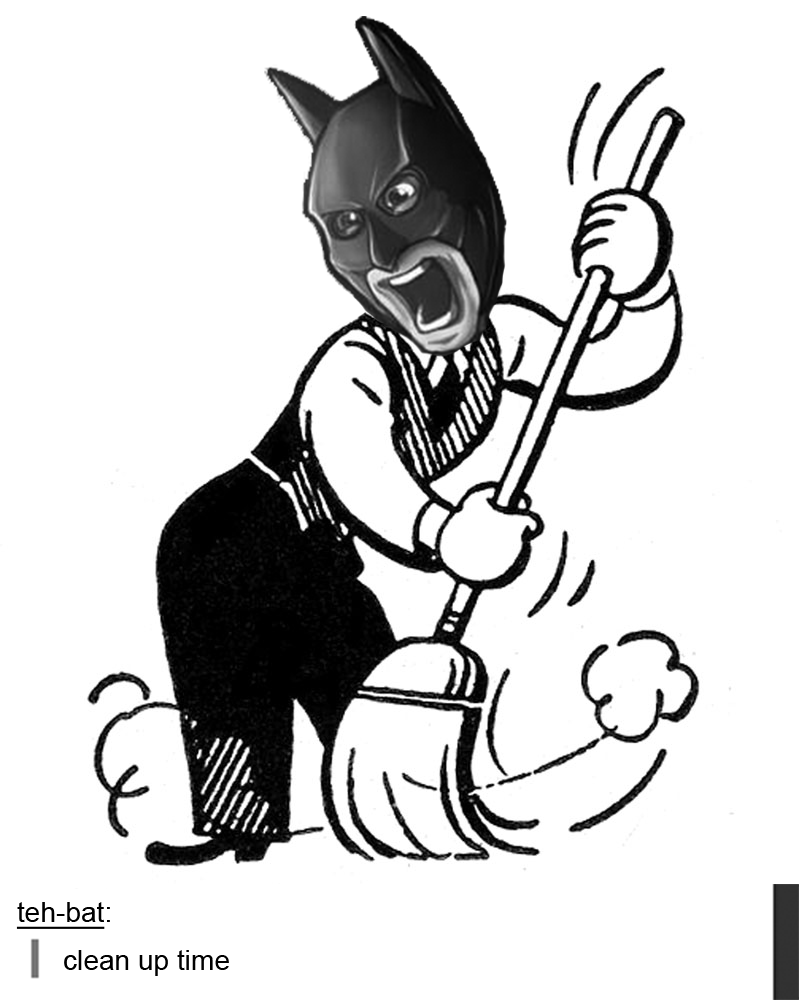
<style>
.page{position:relative;width:799px;height:1000px;background:#ffffff}
.page>*{position:absolute;margin:0}
.t1{font:27.7px "ArialMT";color:#000000;text-decoration:underline}
.t2{font:27.7px "ArialMT";color:#000000}
</style>
<div class="page">
<p class="t1" style="left:16px;top:902px;width:94px;height:27px">teh-bat<span class="t2">:</span></p>
<p class="t2" style="left:64px;top:950px;width:165px;height:26px">clean up time</p>
</div>
